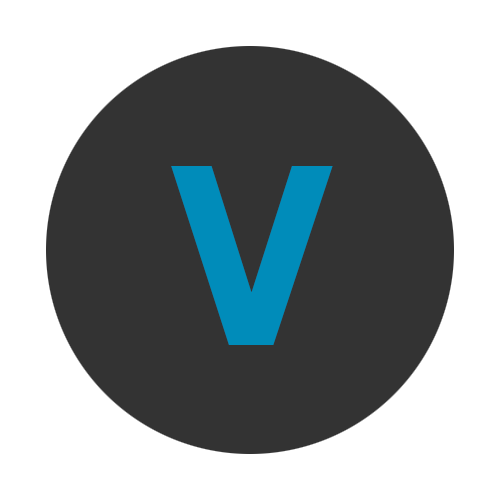
<style>
.page{position:relative;width:500px;height:500px;background:#ffffff}
.page>*{position:absolute;margin:0}
.t1{font:250px "HelveticaNeue-Bold";color:#008cba}
</style>
<div class="page">
<p class="t1" style="left:171px;top:166px;width:162px;height:179px">V</p>
</div>
